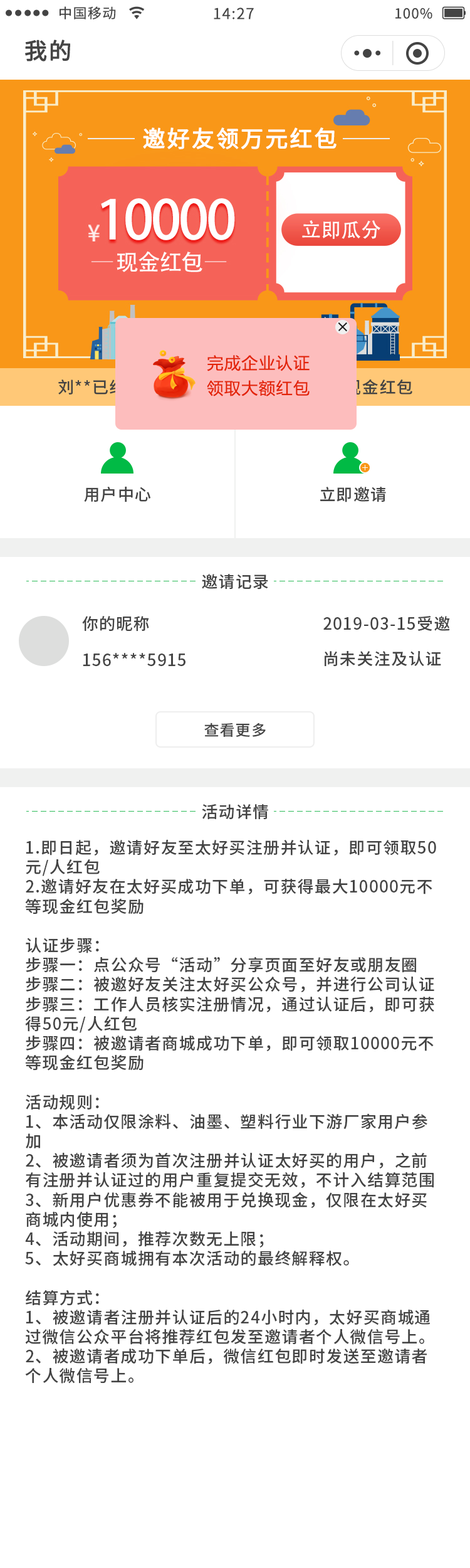
<style>
.page{position:relative;width:470px;height:1568px;background:#ffffff}
.page>*{position:absolute;margin:0}
.t1{font:13.8px "NotoSansCJKsc-Regular";letter-spacing:0.06em;color:#444444}
.t2{font:15.1px "NotoSansCJKsc-Regular";letter-spacing:0.06em;color:#444444}
.t3{font:22.6px "NotoSansCJKsc-Regular";letter-spacing:0.06em;color:#444444;font-weight:bold}
.t4{font:16.3px/25.1px "MicrosoftYaHei";letter-spacing:0.06em;color:#e32306}
.t5{font:16.3px "SourceHanSansSC-Medium";letter-spacing:0.05em}
.t6{font:16.3px "SourceHanSansSC-Medium";letter-spacing:0.05em;color:#444444}
.t7{font:15.1px "SourceHanSansSC-Medium";letter-spacing:0.05em;color:#444444}
</style>
<div class="page">
<p class="t1" style="left:60px;top:6px;width:56px;height:13px">中国移动</p>
<p class="t2" style="left:214px;top:8px;width:40px;height:11px">14:27</p>
<p class="t1" style="left:396px;top:8px;width:37px;height:11px">100%</p>
<p class="t3" style="left:25px;top:40px;width:45px;height:21px">我的</p>
<p class="t4" style="left:207px;top:355px;width:103px;height:41px">完成企业认证<br>领取大额红包</p>
<p class="t5" style="left:58px;top:379px;width:355px;height:16px">刘**已经成功邀请林**关注获得200元现金红包</p>
<p class="t6" style="left:84px;top:486px;width:67px;height:16px">用户中心</p>
<p class="t6" style="left:320px;top:487px;width:66px;height:15px">立即邀请</p>
<p class="t6" style="left:202px;top:574px;width:66px;height:16px">邀请记录</p>
<p class="t6" style="left:82px;top:616px;width:67px;height:16px">你的昵称</p>
<p class="t6" style="left:324px;top:616px;width:126px;height:15px">2019-03-15受邀</p>
<p class="t6" style="left:83px;top:653px;width:103px;height:13px">156****5915</p>
<p class="t6" style="left:325px;top:650px;width:117px;height:17px">尚未关注及认证</p>
<p class="t7" style="left:204px;top:723px;width:62px;height:14px">查看更多</p>
<p class="t6" style="left:202px;top:804px;width:66px;height:16px">活动详情</p>
<p class="t6" style="left:25px;top:839px;width:412px;height:545px">1.即日起，邀请好友至太好买注册并认证，即可领取50元/人红包<br>2.邀请好友在太好买成功下单，可获得最大10000元不等现金红包奖励<br><br>认证步骤：<br>步骤一：点公众号“活动”分享页面至好友或朋友圈<br>步骤二：被邀好友关注太好买公众号，并进行公司认证<br>步骤三：工作人员核实注册情况，通过认证后，即可获得50元/人红包<br>步骤四：被邀请者商城成功下单，即可领取10000元不等现金红包奖励<br><br>活动规则：<br>1、本活动仅限涂料、油墨、塑料行业下游厂家用户参加<br>2、被邀请者须为首次注册并认证太好买的用户，之前有注册并认证过的用户重复提交无效，不计入结算范围<br>3、新用户优惠券不能被用于兑换现金，仅限在太好买商城内使用；<br>4、活动期间，推荐次数无上限；<br>5、太好买商城拥有本次活动的最终解释权。<br><br>结算方式：<br>1、被邀请者注册并认证后的24小时内，太好买商城通过微信公众平台将推荐红包发至邀请者个人微信号上。<br>2、被邀请者成功下单后，微信红包即时发送至邀请者个人微信号上。<br><br><br><br>温馨提醒：对于活动有任何不懂的，欢迎通过微信公众号咨询太好买客服。</p>
</div>
